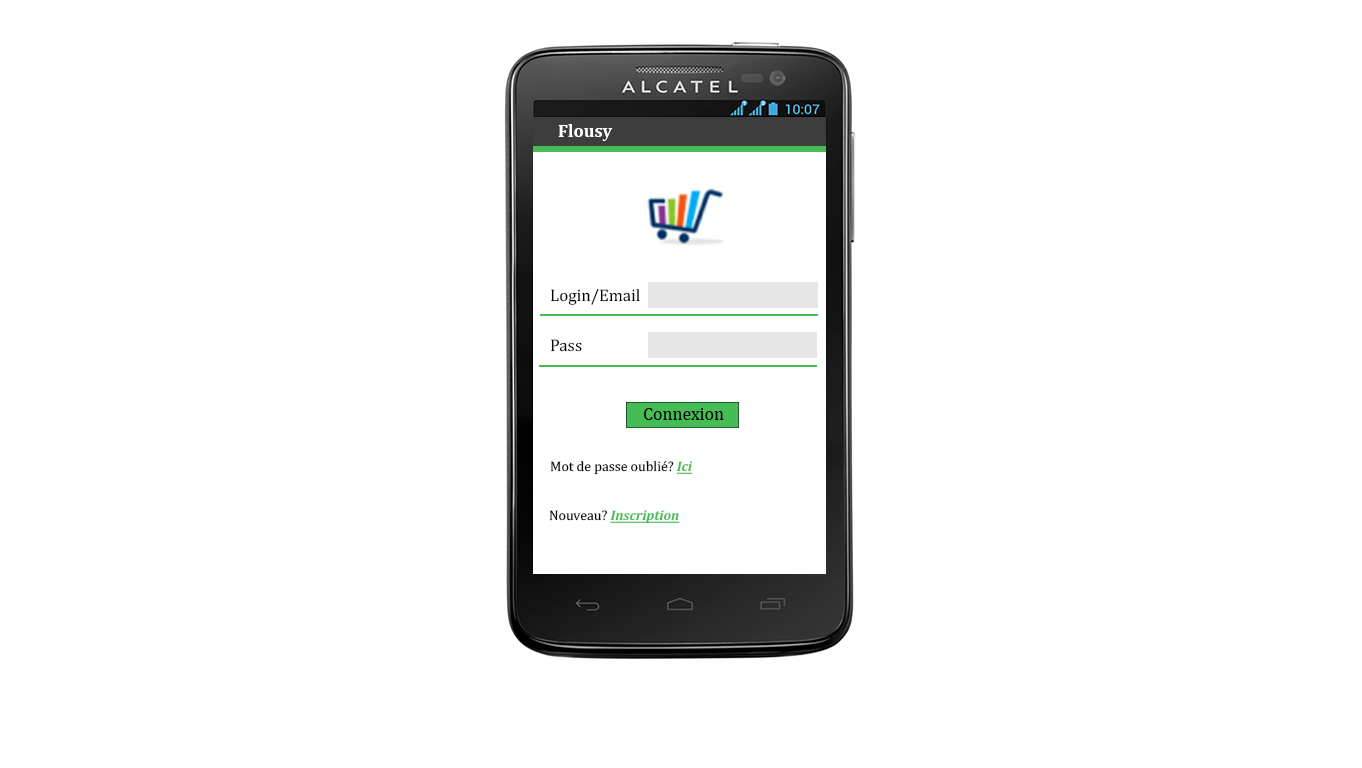
<style>
.page{position:relative;width:1362px;height:768px;background:#ffffff}
.page>*{position:absolute;margin:0}
.t1{font:18px "Cambria-Bold";color:#ffffff}
.t2{font:17px "Cambria";color:#000000}
.t3{font:17.9px "Cambria";color:#000000}
.t4{font:14px "Cambria";color:#000000}
.t5{font:14px "Cambria-BoldItalic";color:#45bc55;text-decoration:underline}
</style>
<div class="page">
<p class="t1" style="left:558px;top:124px;width:55px;height:17px">Flousy</p>
<p class="t2" style="left:551px;top:289px;width:89px;height:16px">Login/Email</p>
<p class="t2" style="left:551px;top:339px;width:31px;height:13px">Pass</p>
<p class="t3" style="left:644px;top:408px;width:80px;height:12px">Connexion</p>
<p class="t4" style="left:550px;top:461px;width:143px;height:14px">Mot de passe oublié? <span class="t5">Ici</span></p>
<p class="t5" style="left:549px;top:510px;width:131px;height:14px"><span class="t4">Nouveau? </span>Inscription</p>
</div>
